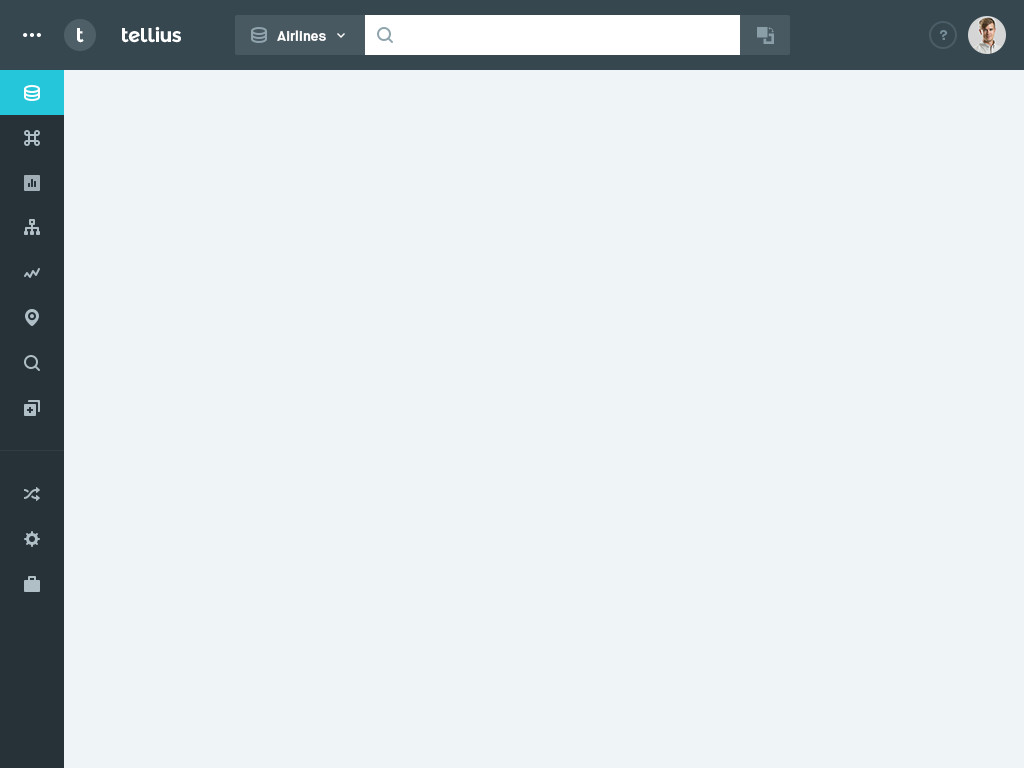
<style>
.page{position:relative;width:1024px;height:768px;background:#eff4f7}
.page>*{position:absolute;margin:0}
.t1{font:20px "MontserratAlternates-Bold";letter-spacing:-0.04em;color:#ffffff}
.t2{font:14px "MaisonNeue-Bold";color:#ffffff}
.t3{font:14px "MaisonNeue-Bold";color:#78909c}
</style>
<div class="page">
<p class="t1" style="left:77px;top:28px;width:7px;height:15px">t</p>
<p class="t1" style="left:122px;top:26px;width:59px;height:17px">tellius</p>
<p class="t2" style="left:277px;top:30px;width:49px;height:11px">Airlines</p>
<p class="t3" style="left:939px;top:30px;width:9px;height:10px">?</p>
</div>
